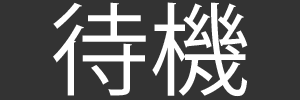
<style>
.page{position:relative;width:300px;height:100px;background:#333333}
.page>*{position:absolute;margin:0}
.t1{font:100px "KozGoPr6N-Regular";color:#ffffff}
</style>
<div class="page">
<p class="t1" style="left:53px;top:2px;width:195px;height:95px">待機</p>
</div>
